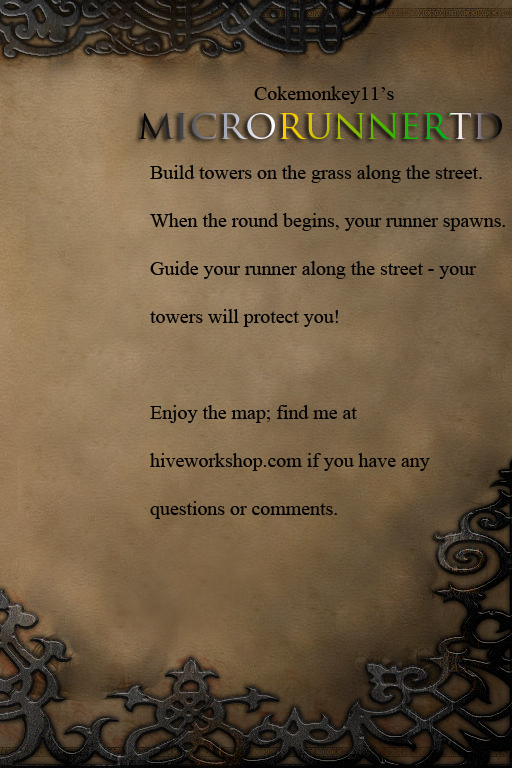
<style>
.page{position:relative;width:512px;height:768px}
.page>*{position:absolute;margin:0}
.t1{font:20px "TimesNewRomanPSMT";letter-spacing:-0.003em;color:#000000}
.t2{font:40px "TrajanPro-Regular";letter-spacing:-0.003em}
.t3{font:20px/48px "TimesNewRomanPSMT";letter-spacing:-0.003em;color:#000000}
</style>
<div class="page">
<p class="t1" style="left:254px;top:86px;width:140px;height:18px">Cokemonkey11’s</p>
<p class="t2" style="left:138px;top:112px;width:364px;height:28px">microrunnertd</p>
<p class="t3" style="left:150px;top:165px;width:355px;height:354px">Build towers on the grass along the street. <br>When the round begins, your runner spawns. <br>Guide your runner along the street - your<br>towers will protect you!<br><br>Enjoy the map; find me at<br>hiveworkshop.com if you have any<br>questions or comments.</p>
</div>
